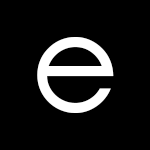
<style>
.page{position:relative;width:150px;height:150px;background:#000000}
.page>*{position:absolute;margin:0}
.t1{font:139.4px "OpificioNeue";color:#ffffff}
</style>
<div class="page">
<p class="t1" style="left:37px;top:37px;width:77px;height:76px">e</p>
</div>
